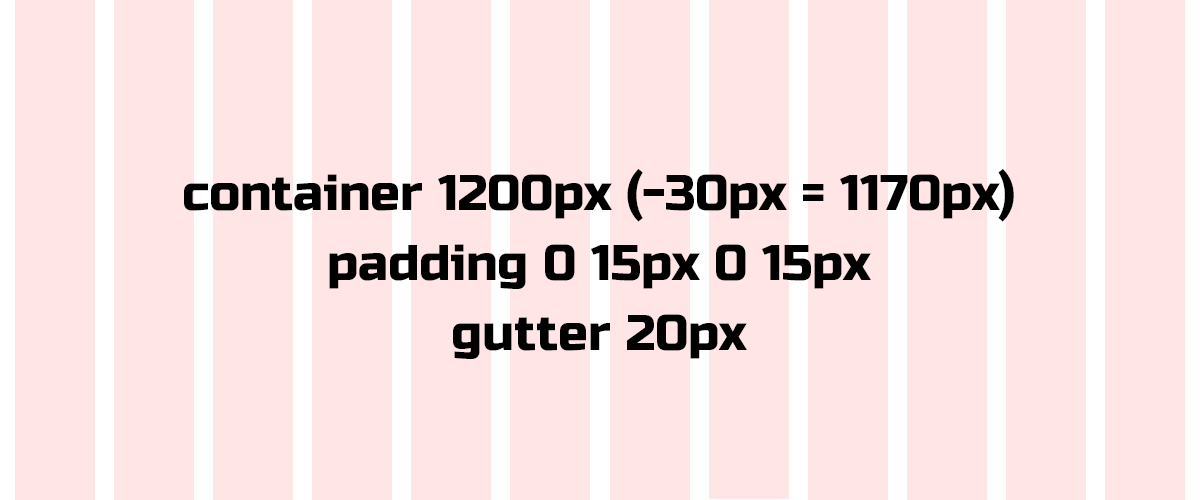
<style>
.page{position:relative;width:1200px;height:500px;background:#ffe5e5}
.page>*{position:absolute;margin:0}
.t1{font:50px/70px "RussoOne-Regular";color:#000000}
</style>
<div class="page">
<p class="t1" style="left:184px;top:169px;width:830px;height:190px;text-align:center">container 1200px (-30px = 1170px)<br>padding 0 15px 0 15px<br>gutter 20px</p>
</div>
